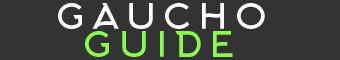
<style>
.page{position:relative;width:340px;height:60px;background:#333333}
.page>*{position:absolute;margin:0}
.t1{font:34.3px "Arkhip";letter-spacing:0.2em;color:#ffffff;text-transform:uppercase}
.t2{font:34.3px "Arkhip";letter-spacing:0.2em;color:#8cf854;text-transform:uppercase}
</style>
<div class="page">
<p class="t1" style="left:58px;top:3px;width:207px;height:26px">Gaucho</p>
<p class="t2" style="left:85px;top:31px;width:148px;height:26px">Guide</p>
</div>
